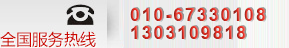
<style>
.page{position:relative;width:289px;height:48px}
.page>*{position:absolute;margin:0}
.t1{font:18px/18px "Arial-BoldMT";letter-spacing:0.1em}
</style>
<div class="page">
<p class="t1" style="left:130px;top:8px;width:136px;height:31px">010-67330108<br>1303109818</p>
</div>
